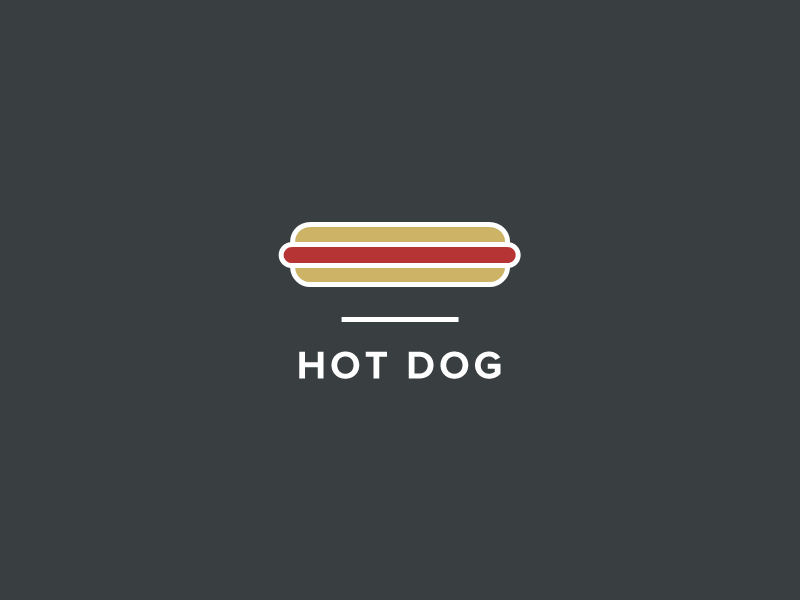
<style>
.page{position:relative;width:800px;height:600px;background:#393f40}
.page>*{position:absolute;margin:0}
.t1{font:40px "ProximaNova-Bold";letter-spacing:0.1em;color:#fefefe;text-transform:uppercase}
</style>
<div class="page">
<p class="t1" style="left:299px;top:351px;width:202px;height:28px">hot dog</p>
</div>
